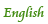
<style>
.page{position:relative;width:48px;height:24px;background:#ffffff}
.page>*{position:absolute;margin:0}
.t1{font:14px "CataneoBT-Regular";color:#458d15}
</style>
<div class="page">
<p class="t1" style="left:3px;top:6px;width:41px;height:16px">English</p>
</div>
